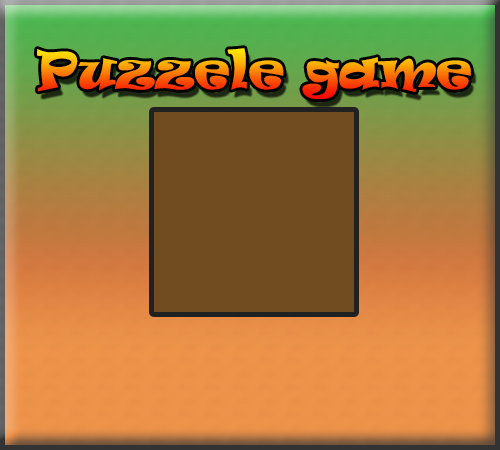
<style>
.page{position:relative;width:500px;height:450px}
.page>*{position:absolute;margin:0}
.t1{font:48px "Ravie"}
</style>
<div class="page">
<p class="t1" style="left:37px;top:48px;width:434px;height:51px">Puzzele game</p>
</div>
